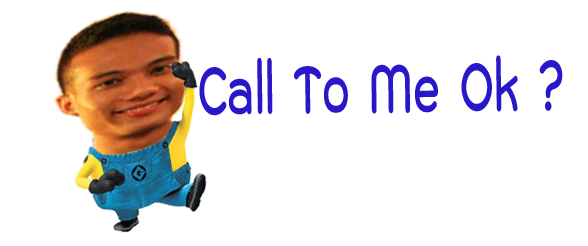
<style>
.page{position:relative;width:588px;height:246px;background:#ffffff}
.page>*{position:absolute;margin:0}
.t1{font:97.5px "THKodchasal-Bold";color:#2918c9;scale:0.65 1}
</style>
<div class="page">
<p class="t1" style="left:199px;top:55px;width:364px;height:61px;rotate:-1deg">? Call To Me Ok</p>
</div>
